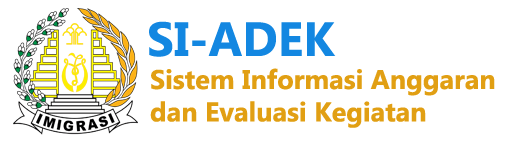
<style>
.page{position:relative;width:532px;height:146px;background:#ffffff}
.page>*{position:absolute;margin:0}
.t1{font:48px "Gadugi-Bold";color:#1387e1}
.t2{font:27px "Gadugi-Bold";color:#e19f13}
</style>
<div class="page">
<p class="t1" style="left:149px;top:21px;width:187px;height:36px">SI-ADEK</p>
<p class="t2" style="left:150px;top:68px;width:345px;height:60px">Sistem Informasi Anggaran <br>dan Evaluasi Kegiatan</p>
</div>
